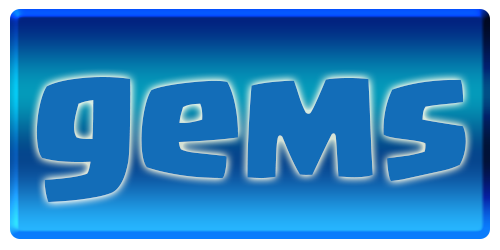
<style>
.page{position:relative;width:500px;height:250px;background:#136db8}
.page>*{position:absolute;margin:0}
.t1{font:125px "Supercell-Magic";color:#136db8}
</style>
<div class="page">
<p class="t1" style="left:36px;top:77px;width:430px;height:125px">gems</p>
</div>
